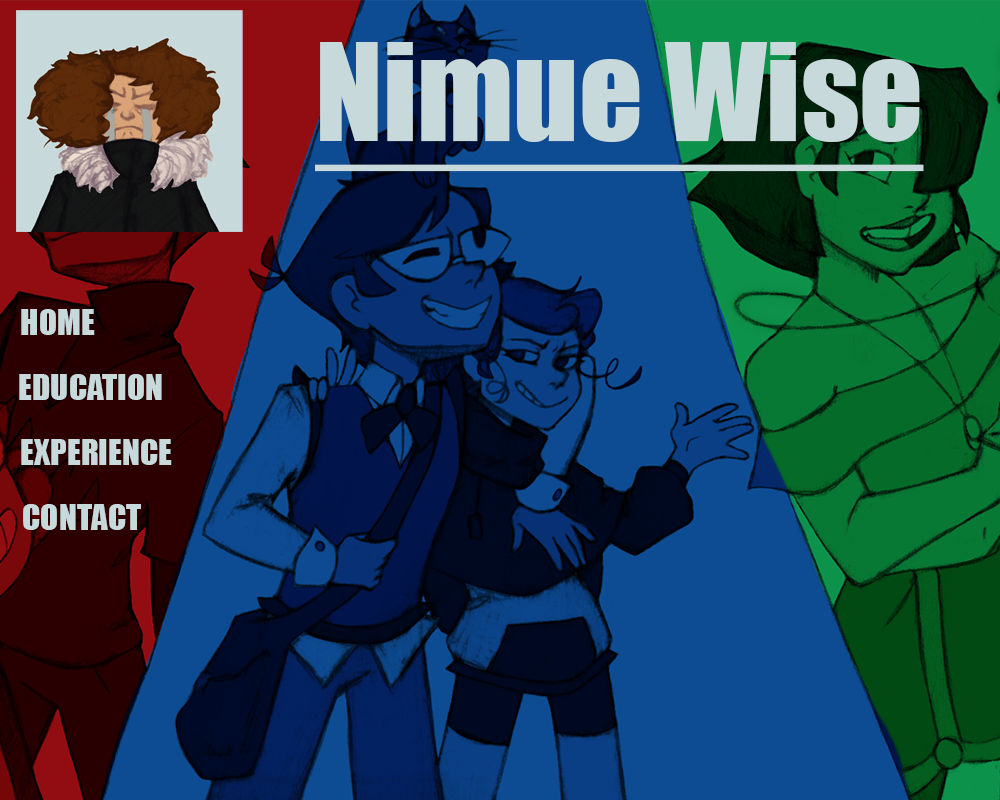
<style>
.page{position:relative;width:1000px;height:800px;background:#0d4c92}
.page>*{position:absolute;margin:0}
.t1{font:125px "Impact";color:#c7d9db;text-decoration:underline}
.t2{font:33.3px "Impact";color:#c7d9db}
</style>
<div class="page">
<p class="t1" style="left:315px;top:42px;width:609px;height:130px">Nimue Wise</p>
<p class="t2" style="left:21px;top:309px;width:74px;height:26px">HOME</p>
<p class="t2" style="left:19px;top:374px;width:143px;height:26px">EDUCATION</p>
<p class="t2" style="left:21px;top:439px;width:151px;height:26px">EXPERIENCE</p>
<p class="t2" style="left:23px;top:504px;width:118px;height:26px">CONTACT</p>
</div>
